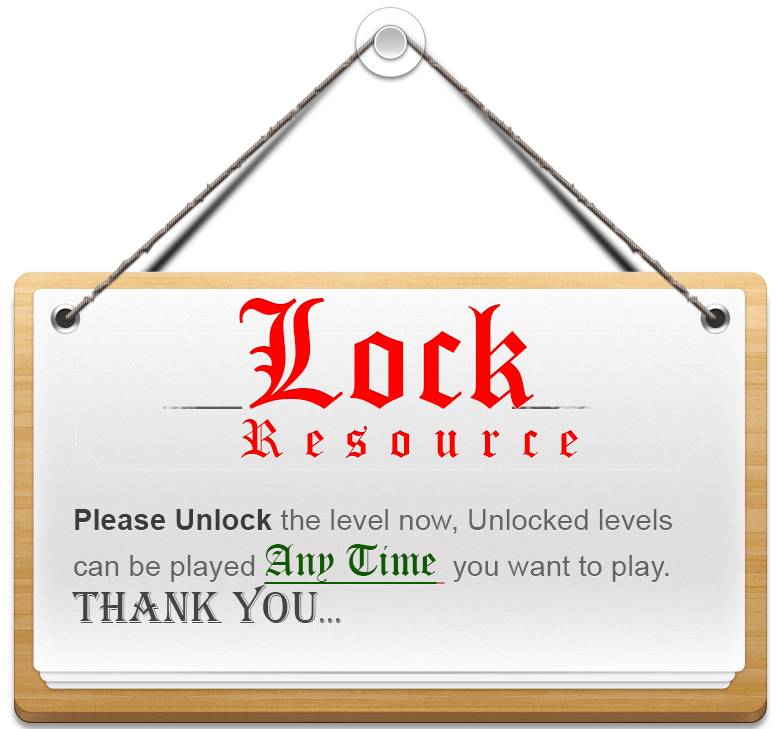
<style>
.page{position:relative;width:780px;height:729px;background:#ffffff}
.page>*{position:absolute;margin:0}
.t1{font:51.5px/49.1px "OldEnglishTextMT";letter-spacing:0.4em;color:#ff0000}
.t2{font:150px/49.1px "OldEnglishTextMT";color:#ff0000}
.t3{font:29.4px/46.6px "ArialMT";color:#656261}
.t4{font:29.4px/46.6px "Arial-BoldMT";color:#3d3a39}
.t5{font:41.7px/46.6px "OldEnglishTextMT";color:#0e5a01;text-decoration:underline}
.t6{font:45.8px/46.6px "Algerian";color:#444444}
.t7{font:29.4px/46.6px "Algerian";color:#656261}
</style>
<div class="page">
<p class="t1" style="left:239px;top:298px;width:339px;height:160px"><span class="t2">Lock<br></span>Resource</p>
<p class="t3" style="left:72px;top:509px;width:600px;height:114px"><span class="t4">Please Unlock</span> the level now, Unlocked levels can be played <span class="t5">Any Time </span> you want to play. <span class="t6">Thank You</span><span class="t7">...</span></p>
</div>
